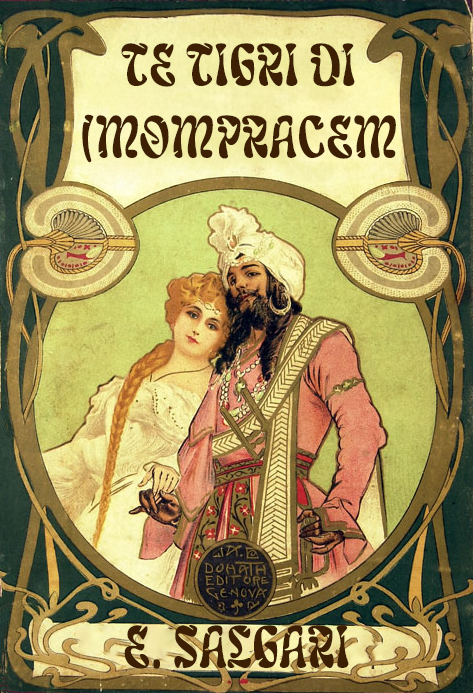
<style>
.page{position:relative;width:473px;height:693px}
.page>*{position:absolute;margin:0}
.t1{font:65px/72px "Lafleur-Regular";color:#3d2003}
.t2{font:65px "Lafleur-Regular";color:#3d2003}
</style>
<div class="page">
<p class="t1" style="left:82px;top:43px;width:314px;height:120px;text-align:center">TE TIGRI DI<br>(MOMPRACEM</p>
<p class="t2" style="left:124px;top:625px;width:225px;height:44px">E. SALGARI</p>
</div>
